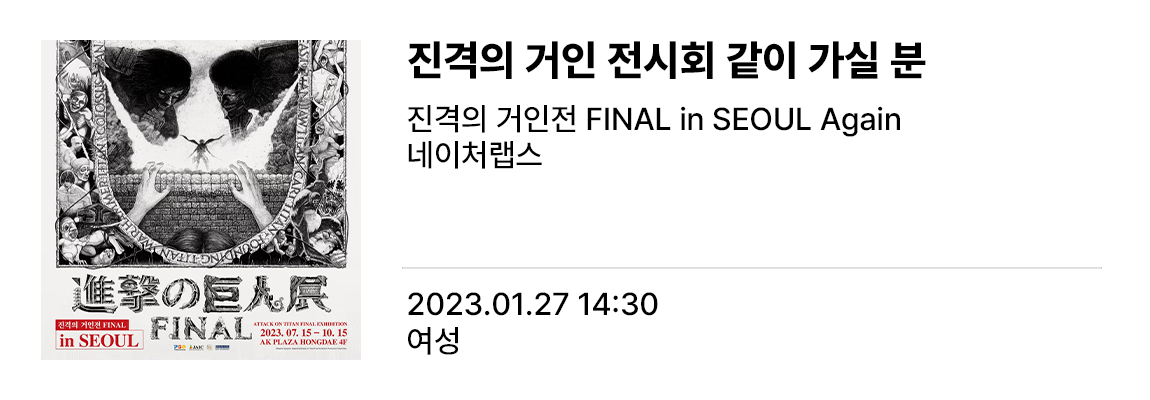
<style>
.page{position:relative;width:1150px;height:400px;background:#ffffff}
.page>*{position:absolute;margin:0}
.t1{font:42px "PretendardVariable-ExtraBold";color:#000000}
.t2{font:31.5px "PretendardVariable-Medium";color:#000000}
</style>
<div class="page">
<p class="t1" style="left:408px;top:41px;width:518px;height:38px">진격의 거인 전시회 같이 가실 분</p>
<p class="t2" style="left:407px;top:105px;width:493px;height:32px">진격의 거인전 FINAL in SEOUL Again</p>
<p class="t2" style="left:408px;top:141px;width:134px;height:28px">네이처랩스</p>
<p class="t2" style="left:408px;top:292px;width:250px;height:24px">2023.01.27 14:30</p>
<p class="t2" style="left:408px;top:327px;width:50px;height:28px">여성</p>
</div>
